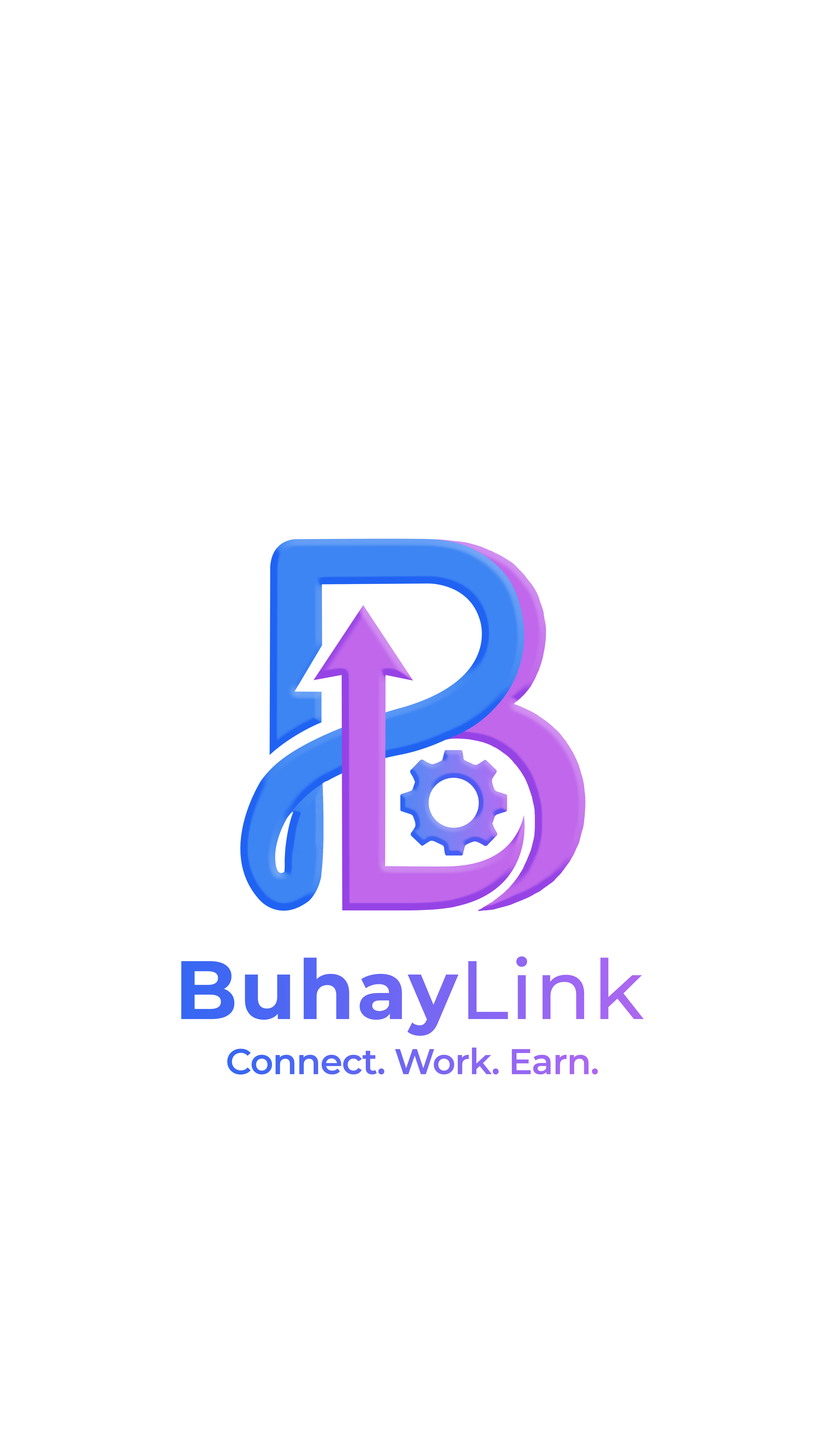
<style>
.page{position:relative;width:825px;height:1445px;background:#ffffff}
.page>*{position:absolute;margin:0}
.t1{font:82.7px "MontserratRoman-Bold";letter-spacing:0.02em}
.t2{font:82.7px "MontserratRoman-Medium";letter-spacing:0.02em}
.t3{font:35.8px "MontserratRoman-SemiBold";letter-spacing:-0.02em}
</style>
<div class="page">
<p class="t1" style="left:181px;top:956px;width:463px;height:80px">Buhay<span class="t2">Link</span></p>
<p class="t3" style="left:227px;top:1047px;width:371px;height:27px">Connect. Work. Earn.</p>
</div>
